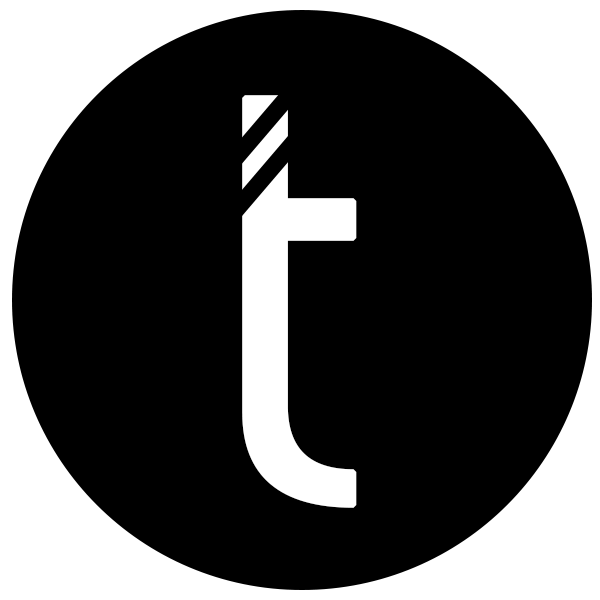
<style>
.page{position:relative;width:600px;height:600px;background:#000000}
.page>*{position:absolute;margin:0}
.t1{font:521.3px "AbeatbyKai";color:#ffffff;font-weight:bold}
</style>
<div class="page">
<p class="t1" style="left:242px;top:95px;width:115px;height:413px">t</p>
</div>
